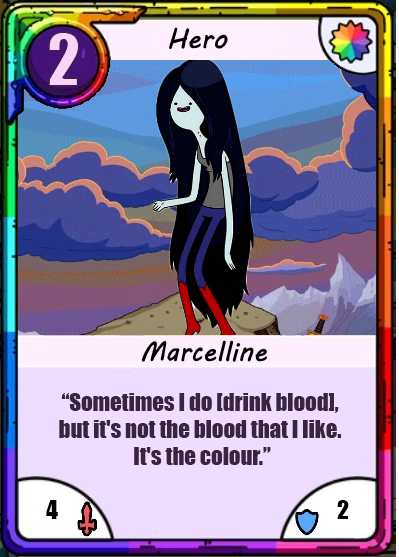
<style>
.page{position:relative;width:399px;height:557px}
.page>*{position:absolute;margin:0}
.t1{font:66.7px "Impact";color:#f8d4fa}
.t2{font:22.7px "Impact";color:#3b2440}
.t3{font:24px "Impact";color:#000000}
</style>
<div class="page">
<p class="t1" style="left:48px;top:32px;width:31px;height:54px">2</p>
<p class="t2" style="left:59px;top:393px;width:283px;height:72px;text-align:center">“Sometimes I do [drink blood], <br>but it's not the blood that I like. <br>It's the colour.”</p>
<p class="t3" style="left:46px;top:500px;width:12px;height:19px">4</p>
<p class="t3" style="left:337px;top:500px;width:12px;height:19px">2</p>
</div>
